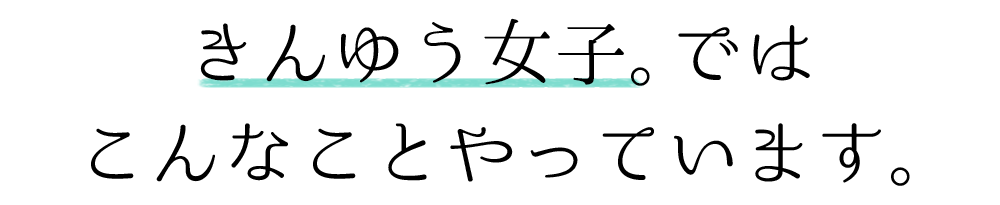
<style>
.page{position:relative;width:1000px;height:205px;background:#ffffff}
.page>*{position:absolute;margin:0}
.t1{font:74px/100px "02UtsukushiMincho";color:#000000}
.t2{font:74px/100px "02UtsukushiMincho";letter-spacing:-0.45em;color:#000000}
</style>
<div class="page">
<p class="t1" style="left:91px;top:18px;width:819px;height:168px;text-align:center">きんゆう女子<span class="t2">。</span>では<br> こんなことやっています。</p>
</div>
